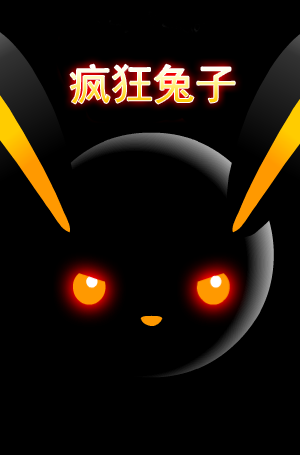
<style>
.page{position:relative;width:300px;height:455px;background:#000000}
.page>*{position:absolute;margin:0}
.t1{font:42px "SimHei"}
</style>
<div class="page">
<p class="t1" style="left:70px;top:64px;width:165px;height:40px">疯狂兔子</p>
</div>
